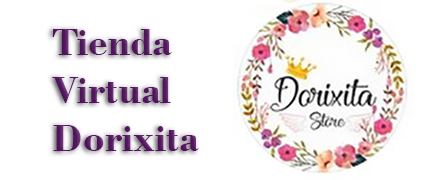
<style>
.page{position:relative;width:444px;height:180px;background:#ffffff}
.page>*{position:absolute;margin:0}
.t1{font:40px "BodoniBT-Bold";color:#581565}
</style>
<div class="page">
<p class="t1" style="left:52px;top:29px;width:147px;height:122px">Tienda <br>Virtual<br>Dorixita</p>
</div>
